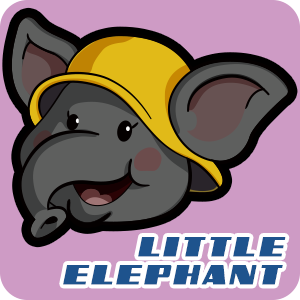
<style>
.page{position:relative;width:300px;height:300px;background:#ce9bc5}
.page>*{position:absolute;margin:0}
.t1{font:32.3px "GalacticStorm";letter-spacing:0.08em;color:#1e538d;font-weight:bold;font-style:italic;scale:1.15 1}
.t2{font:32.2px "GalacticStorm";letter-spacing:0.08em;color:#1e538d;font-weight:bold;font-style:italic;scale:1.15 1}
</style>
<div class="page">
<p class="t1" style="left:138px;top:237px;width:148px;height:20px">LITTLE</p>
<p class="t2" style="left:63px;top:265px;width:220px;height:20px">ELEPHANT</p>
</div>
